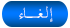
<style>
.page{position:relative;width:70px;height:28px}
.page>*{position:absolute;margin:0}
.t1{font:21.1px "TraditionalArabic";letter-spacing:-0.08em;color:#fbfcfc;scale:0.84 1}
</style>
<div class="page">
<p class="t1" style="left:19px;top:6px;width:34px;height:16px">إ        لــغــــــــــــا ء</p>
</div>
